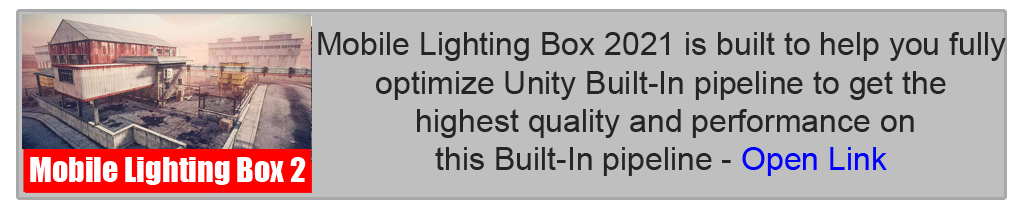
<style>
.page{position:relative;width:1024px;height:210px;background:#bfbfbf}
.page>*{position:absolute;margin:0}
.t1{font:32px "ArialMT";color:#252525}
.t2{font:32px "ArialMT";color:#0000ff}
.t3{font:32px "Impact";color:#ffffff}
</style>
<div class="page">
<p class="t1" style="left:318px;top:32px;width:688px;height:144px;text-align:center">Mobile Lighting Box 2021 is built to help you fully<br> optimize Unity Built-In pipeline to get the <br>highest quality and performance on <br>this Built-In pipeline - <span class="t2">Open Link</span></p>
<p class="t3" style="left:30px;top:157px;width:276px;height:28px">Mobile Lighting Box 2</p>
</div>
